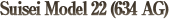
<style>
.page{position:relative;width:174px;height:19px;background:#ffffff}
.page>*{position:absolute;margin:0}
.t1{font:18px "RyuminPro-ExBold";letter-spacing:-0.08em;color:#4a3f32;font-weight:bold;scale:0.9 1}
</style>
<div class="page">
<p class="t1" style="left:0px;top:0px;width:169px;height:19px">Suisei Model 22 (634 AG)</p>
</div>
